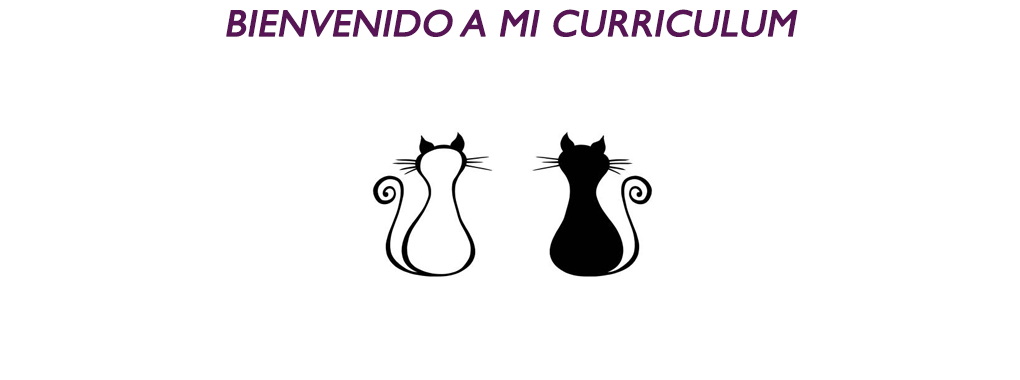
<style>
.page{position:relative;width:1020px;height:380px;background:#ffffff}
.page>*{position:absolute;margin:0}
.t1{font:37.5px "GillSansMT";color:#571555;font-weight:bold;font-style:italic}
</style>
<div class="page">
<p class="t1" style="left:226px;top:9px;width:572px;height:28px">BIENVENIDO A MI CURRICULUM</p>
</div>
